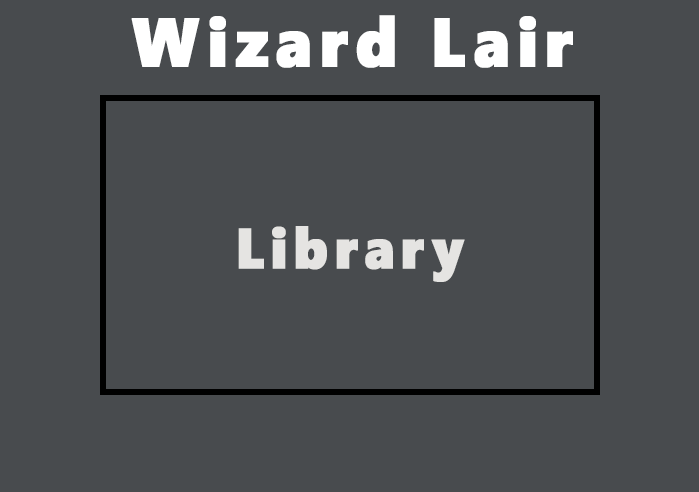
<style>
.page{position:relative;width:699px;height:492px;background:#484b4e}
.page>*{position:absolute;margin:0}
.t1{font:68.5px "SegoeWP-Black";letter-spacing:0.1em;color:#ffffff;font-weight:bold;scale:0.93 1}
.t2{font:56.7px "SegoeWP-Black";letter-spacing:0.1em;color:#e5e4e2;font-weight:bold;scale:0.93 1}
</style>
<div class="page">
<p class="t1" style="left:131px;top:15px;width:442px;height:53px">Wizard Lair</p>
<p class="t2" style="left:238px;top:226px;width:227px;height:56px">Library</p>
</div>
